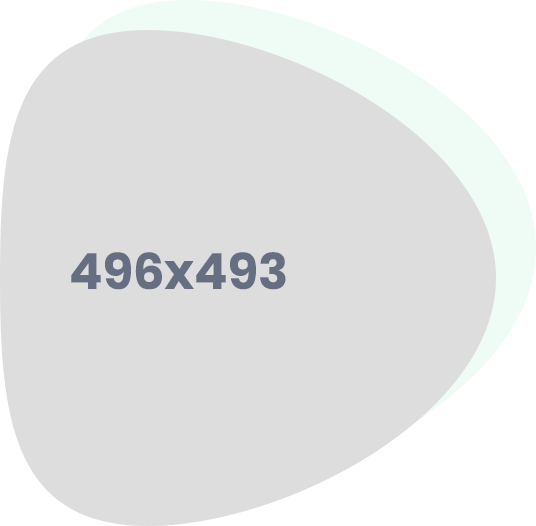
<style>
.page{position:relative;width:536px;height:526px;background:#dddddd}
.page>*{position:absolute;margin:0}
.t1{font:50px "Poppins-Bold";color:#666e82}
</style>
<div class="page">
<p class="t1" style="left:71px;top:252px;width:215px;height:38px">496x493</p>
</div>
